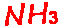
<style>
.page{position:relative;width:61px;height:28px;background:#ffffff}
.page>*{position:absolute;margin:0}
.t1{font:26px "SegoeScript";color:#ff0000;font-weight:bold}
.t2{font:18px "Shruti-Bold";color:#ff0000;font-weight:bold}
</style>
<div class="page">
<p class="t1" style="left:5px;top:2px;width:53px;height:24px">NH<span class="t2">3</span></p>
</div>
